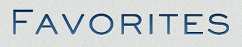
<style>
.page{position:relative;width:242px;height:47px}
.page>*{position:absolute;margin:0}
.t1{font:36px "SweetSans-ThinSC";font-weight:bold;scale:1.04 1}
</style>
<div class="page">
<p class="t1" style="left:13px;top:9px;width:216px;height:26px">Favorites</p>
<p class="t1" style="left:13px;top:9px;width:216px;height:26px">Favorites</p>
</div>
